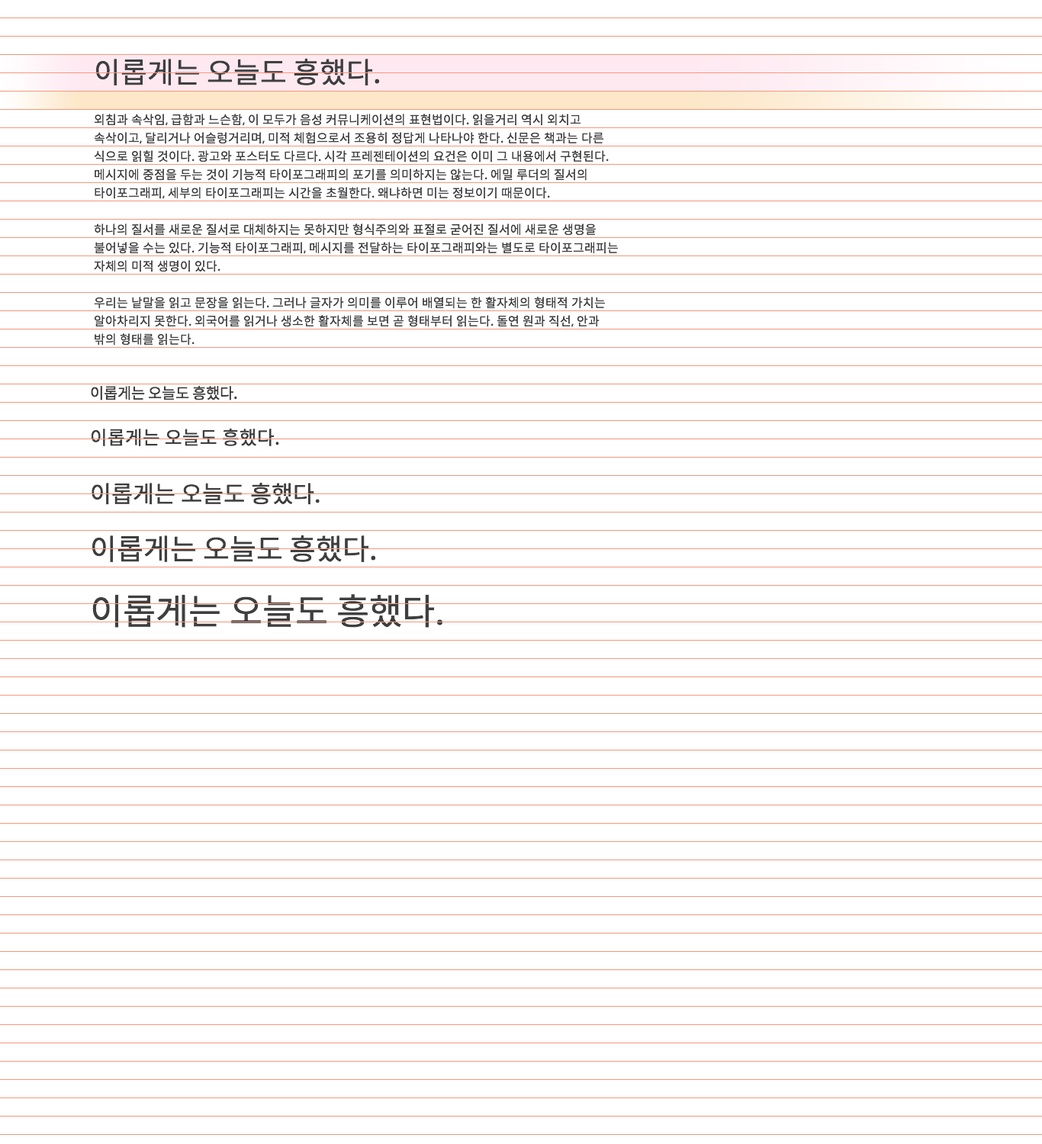
<style>
.page{position:relative;width:1042px;height:1144px;background:#ffffff}
.page>*{position:absolute;margin:0}
.t1{font:28.9px "SpoqaHanSans-Regular";color:#3f3f3f}
.t2{font:12.2px "SpoqaHanSans-Regular";color:#3f3f3f}
.t3{font:15.1px "SpoqaHanSans-Regular";color:#3f3f3f}
.t4{font:18.8px "SpoqaHanSans-Regular";color:#3f3f3f}
.t5{font:23.3px "SpoqaHanSans-Regular";color:#3f3f3f}
.t6{font:35.8px "SpoqaHanSans-Regular";color:#3f3f3f}
</style>
<div class="page">
<p class="t1" style="left:95px;top:58px;width:285px;height:27px">이롭게는 오늘도 흥했다.</p>
<p class="t2" style="left:94px;top:114px;width:525px;height:232px">외침과 속삭임, 급함과 느슨함, 이 모두가 음성 커뮤니케이션의 표현법이다. 읽을거리 역시 외치고 속삭이고, 달리거나 어슬렁거리며, 미적 체험으로서 조용히 정답게 나타나야 한다. 신문은 책과는 다른 식으로 읽힐 것이다. 광고와 포스터도 다르다. 시각 프레젠테이션의 요건은 이미 그 내용에서 구현된다. 메시지에 중점을 두는 것이 기능적 타이포그래피의 포기를 의미하지는 않는다. 에밀 루더의 질서의 타이포그래피, 세부의 타이포그래피는 시간을 초월한다. 왜냐하면 미는 정보이기 때문이다.<br>하나의 질서를 새로운 질서로 대체하지는 못하지만 형식주의와 표절로 굳어진 질서에 새로운 생명을 불어넣을 수는 있다. 기능적 타이포그래피, 메시지를 전달하는 타이포그래피와는 별도로 타이포그래피는 자체의 미적 생명이 있다.<br>우리는 낱말을 읽고 문장을 읽는다. 그러나 글자가 의미를 이루어 배열되는 한 활자체의 형태적 가치는 알아차리지 못한다. 외국어를 읽거나 생소한 활자체를 보면 곧 형태부터 읽는다. 돌연 원과 직선, 안과 밖의 형태를 읽는다.</p>
<p class="t3" style="left:91px;top:385px;width:146px;height:16px">이롭게는 오늘도 흥했다.</p>
<p class="t4" style="left:91px;top:428px;width:188px;height:18px">이롭게는 오늘도 흥했다.</p>
<p class="t5" style="left:92px;top:482px;width:228px;height:23px">이롭게는 오늘도 흥했다.</p>
<p class="t1" style="left:92px;top:535px;width:284px;height:27px">이롭게는 오늘도 흥했다.</p>
<p class="t6" style="left:92px;top:594px;width:350px;height:34px">이롭게는 오늘도 흥했다.</p>
</div>
